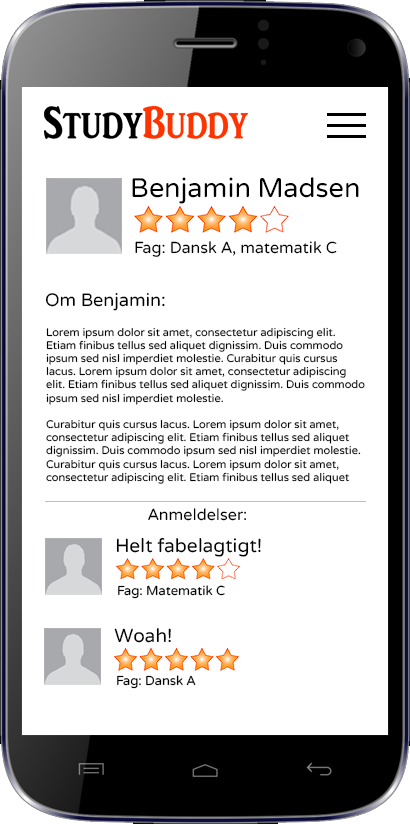
<style>
.page{position:relative;width:410px;height:824px;background:#ffffff}
.page>*{position:absolute;margin:0}
.t1{font:27px "VarelaRound-Regular";color:#000000}
.t2{font:16px "VarelaRound-Regular";color:#000000}
.t3{font:18px "VarelaRound-Regular";color:#000000}
.t4{font:11px "VarelaRound-Regular";color:#000000}
.t5{font:19px "VarelaRound-Regular";color:#000000}
.t6{font:13px "VarelaRound-Regular";color:#000000}
</style>
<div class="page">
<p class="t1" style="left:132px;top:177px;width:227px;height:27px">Benjamin Madsen</p>
<p class="t2" style="left:135px;top:241px;width:202px;height:16px">Fag: Dansk A, matematik C</p>
<p class="t3" style="left:45px;top:293px;width:120px;height:18px">Om Benjamin:</p>
<p class="t4" style="left:46px;top:327px;width:319px;height:157px">Lorem ipsum dolor sit amet, consectetur adipiscing elit. Etiam finibus tellus sed aliquet dignissim. Duis commodo ipsum sed nisl imperdiet molestie. Curabitur quis cursus lacus. Lorem ipsum dolor sit amet, consectetur adipiscing elit. Etiam finibus tellus sed aliquet dignissim. Duis commodo ipsum sed nisl imperdiet molestie.<br><br>Curabitur quis cursus lacus. Lorem ipsum dolor sit amet, consectetur adipiscing elit. Etiam finibus tellus sed aliquet dignissim. Duis commodo ipsum sed nisl imperdiet molestie. Curabitur quis cursus lacus. Lorem ipsum dolor sit amet, consectetur adipiscing elit. Etiam finibus tellus sed aliquet dignissim. Duis commodo ipsum sed nisl imperdiet molestie. Curabitur quis cursus lacus.</p>
<p class="t2" style="left:148px;top:508px;width:98px;height:13px">Anmeldelser:</p>
<p class="t5" style="left:116px;top:537px;width:145px;height:20px">Helt fabelagtigt!</p>
<p class="t6" style="left:118px;top:585px;width:107px;height:14px">Fag: Matematik C</p>
<p class="t5" style="left:114px;top:628px;width:57px;height:15px">Woah!</p>
<p class="t6" style="left:117px;top:675px;width:79px;height:14px">Fag: Dansk A</p>
</div>
